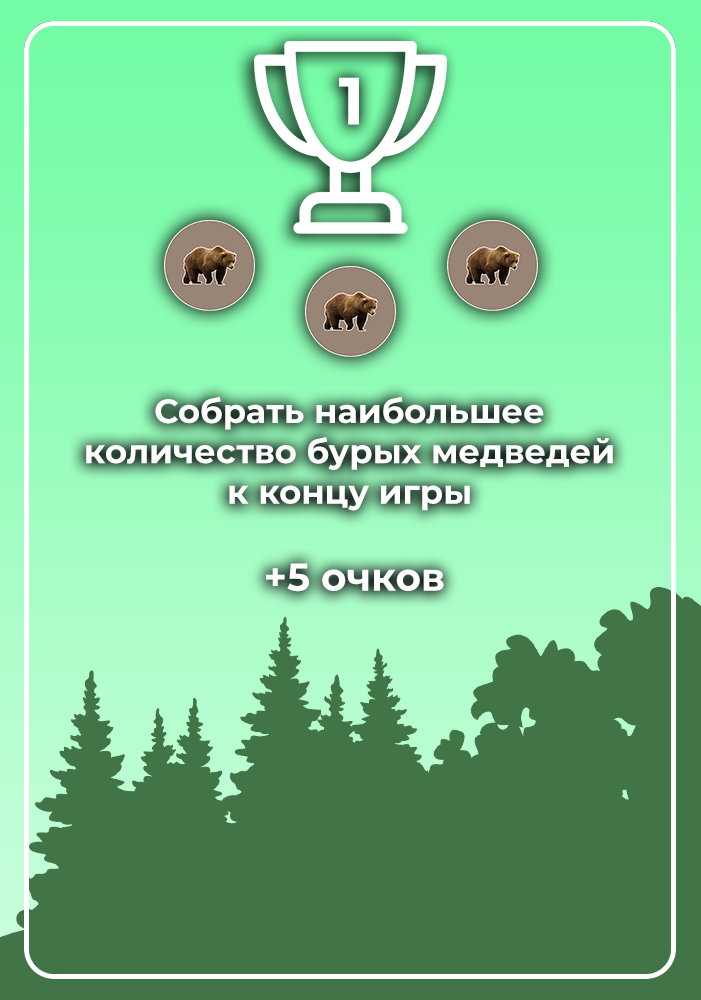
<style>
.page{position:relative;width:701px;height:1000px;background:#417547}
.page>*{position:absolute;margin:0}
.t1{font:66.7px "Montserrat-Bold";color:#ffffff}
.t2{font:33.7px "Montserrat-Bold";color:#ffffff}
.t3{font:38.9px "Montserrat-Bold";color:#ffffff}
</style>
<div class="page">
<p class="t1" style="left:339px;top:77px;width:20px;height:48px">1</p>
<p class="t2" style="left:86px;top:396px;width:527px;height:196px;text-align:center">Собрать наибольшее <br>количество бурых медведей <br>к концу игры <br><br><span class="t3">+5 очков</span></p>
</div>
